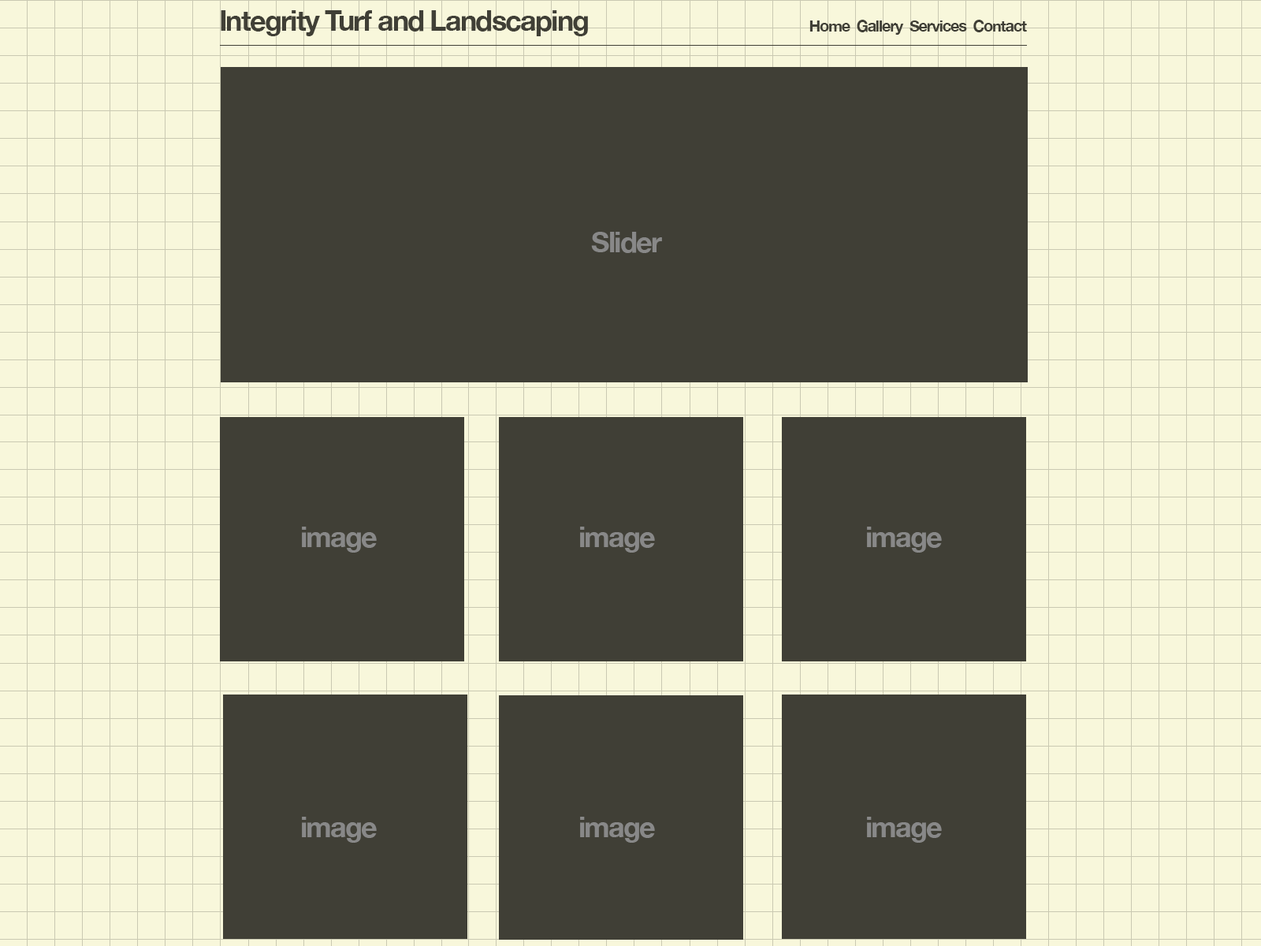
<style>
.page{position:relative;width:1261px;height:946px;background:#403f36}
.page>*{position:absolute;margin:0}
.t1{font:28.4px "HelveticaNeue-Bold";letter-spacing:-0.05em;color:#403f36}
.t2{font:15.4px "HelveticaNeue-Bold";letter-spacing:-0.05em;color:#403f36}
.t3{font:28.4px "HelveticaNeue-Bold";letter-spacing:-0.05em;color:#888888}
</style>
<div class="page">
<p class="t1" style="left:221px;top:10px;width:367px;height:26px">Integrity Turf and Landscaping</p>
<p class="t2" style="left:809px;top:20px;width:218px;height:15px">Home  Gallery  Services  Contact</p>
<p class="t3" style="left:591px;top:232px;width:71px;height:21px">Slider</p>
<p class="t3" style="left:302px;top:526px;width:75px;height:26px">image</p>
<p class="t3" style="left:580px;top:526px;width:75px;height:26px">image</p>
<p class="t3" style="left:867px;top:526px;width:75px;height:26px">image</p>
<p class="t3" style="left:302px;top:816px;width:75px;height:26px">image</p>
<p class="t3" style="left:580px;top:816px;width:75px;height:26px">image</p>
<p class="t3" style="left:867px;top:816px;width:75px;height:26px">image</p>
</div>
